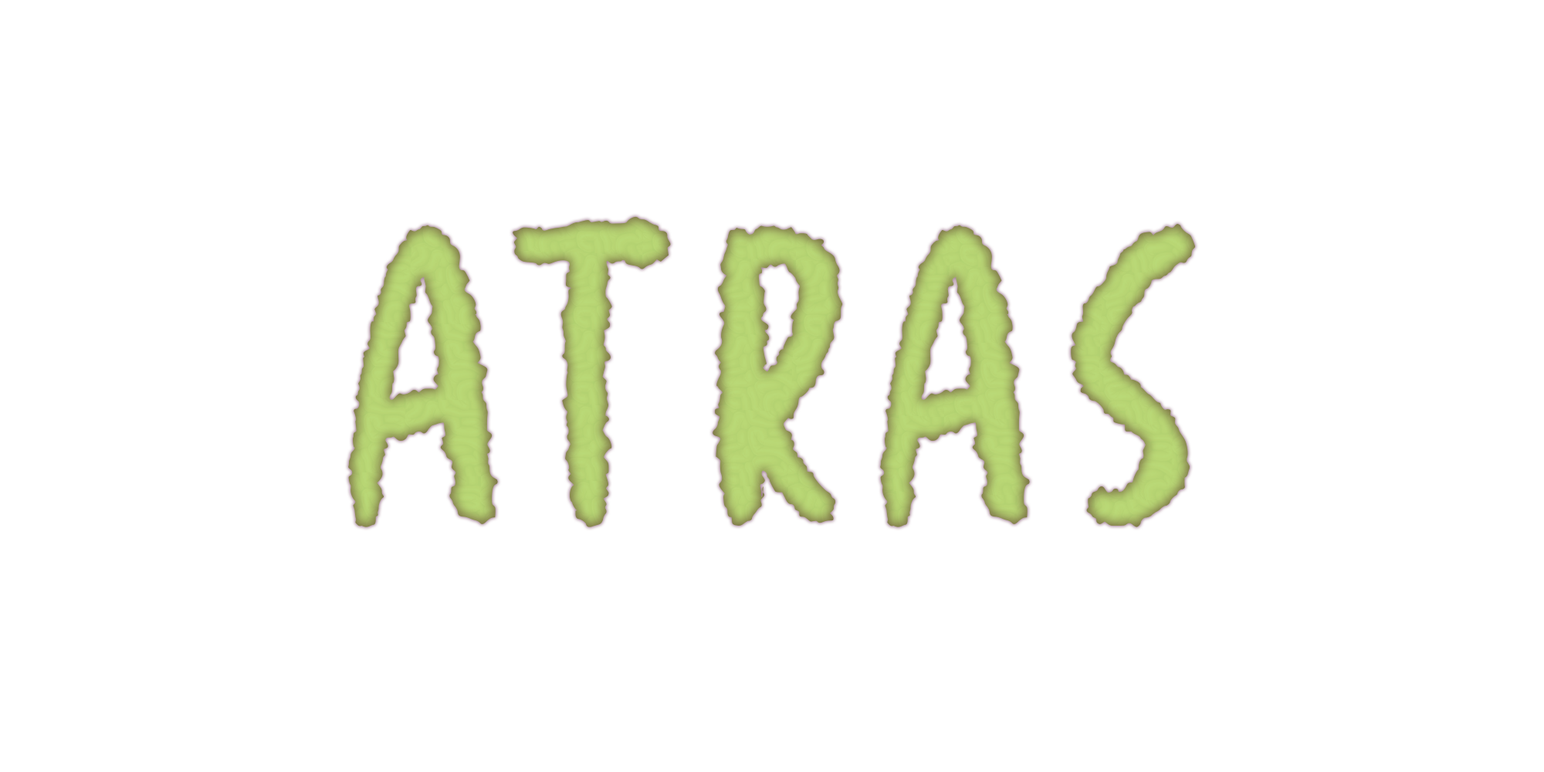
<style>
.page{position:relative;width:1544px;height:772px;background:#ffffff}
.page>*{position:absolute;margin:0}
.t1{font:321.7px "Metalien";letter-spacing:0.1em;color:#b7d974}
</style>
<div class="page">
<p class="t1" style="left:348px;top:216px;width:848px;height:311px">Atras</p>
</div>
